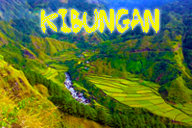
<style>
.page{position:relative;width:192px;height:128px}
.page>*{position:absolute;margin:0}
.t1{font:24px "Brushed";color:#f3f608;scale:1.2 1}
</style>
<div class="page">
<p class="t1" style="left:41px;top:9px;width:118px;height:24px">Kibungan</p>
</div>
